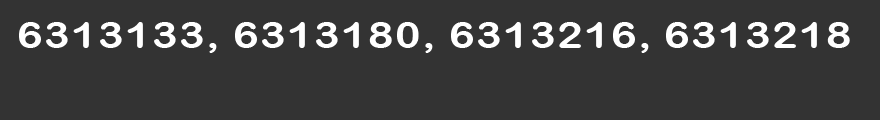
<style>
.page{position:relative;width:880px;height:120px;background:#333333}
.page>*{position:absolute;margin:0}
.t1{font:36px "ArialRoundedMTBold";letter-spacing:0.03em;color:#ffffff;scale:1.2 1}
</style>
<div class="page">
<p class="t1" style="left:19px;top:22px;width:831px;height:31px">6313133, 6313180, 6313216, 6313218</p>
</div>
